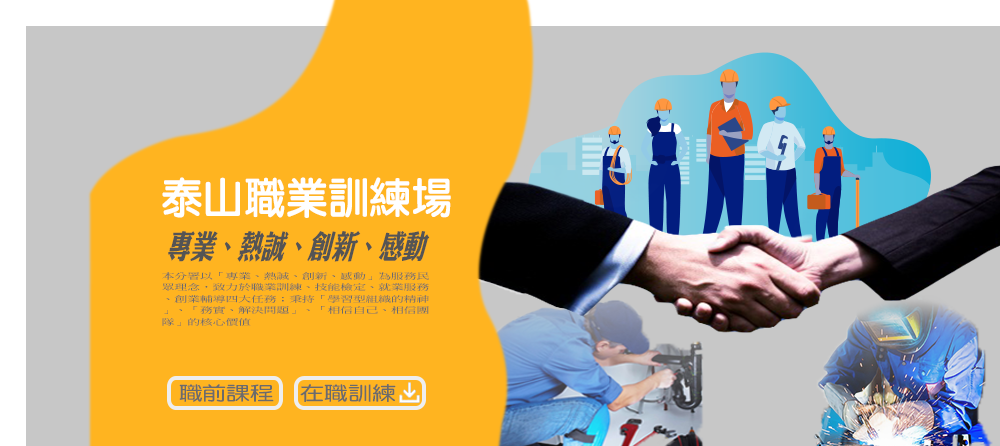
<style>
.page{position:relative;width:1000px;height:446px;background:#ffb420}
.page>*{position:absolute;margin:0}
.t1{font:42.7px "DFLiYuanStd-W7";color:#ffffff}
.t2{font:33.6px "DFLiKingHeiStd-W8";color:#545454;scale:0.7 1}
.t3{font:8.2px/11.6px "DFMingStd-W7";color:#6b6b6b;scale:1.55 1}
.t4{font:19.1px "DFYuanStd-W7";color:#6b6b6b;scale:1.25 1}
</style>
<div class="page">
<p class="t1" style="left:162px;top:177px;width:289px;height:41px">泰山職業訓練場</p>
<p class="t2" style="left:168px;top:231px;width:262px;height:31px">專業、熱誠、創新、感動</p>
<p class="t3" style="left:162px;top:272px;width:267px;height:54px">本分署以「專業、熱誠、創新、感動」為服務民眾理念，致力於職業訓練、技能檢定、就業服務、創業輔導四大任務；秉持「學習型組織的精神」、「務實、解決問題」、「相信自己、相信團隊」的核心價值</p>
<p class="t4" style="left:179px;top:384px;width:95px;height:18px">職前課程</p>
<p class="t4" style="left:300px;top:384px;width:96px;height:18px">在職訓練</p>
</div>
